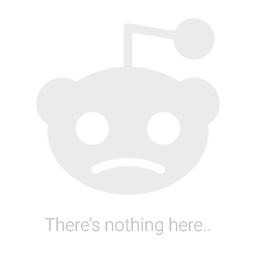
<style>
.page{position:relative;width:256px;height:256px;background:#ffffff}
.page>*{position:absolute;margin:0}
.t1{font:18px "Roboto-Light";color:#bfbfbf}
</style>
<div class="page">
<p class="t1" style="left:44px;top:217px;width:167px;height:18px">There’s nothing here..</p>
</div>
